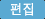
<style>
.page{position:relative;width:45px;height:19px;background:#5aa9d2}
.page>*{position:absolute;margin:0}
.t1{font:13.5px "AppleGothic";letter-spacing:0.05em;color:#ffffff;scale:0.89 1}
</style>
<div class="page">
<p class="t1" style="left:10px;top:3px;width:23px;height:13px">편집</p>
<p class="t1" style="left:10px;top:3px;width:23px;height:13px;opacity:0.57">편집</p>
</div>
